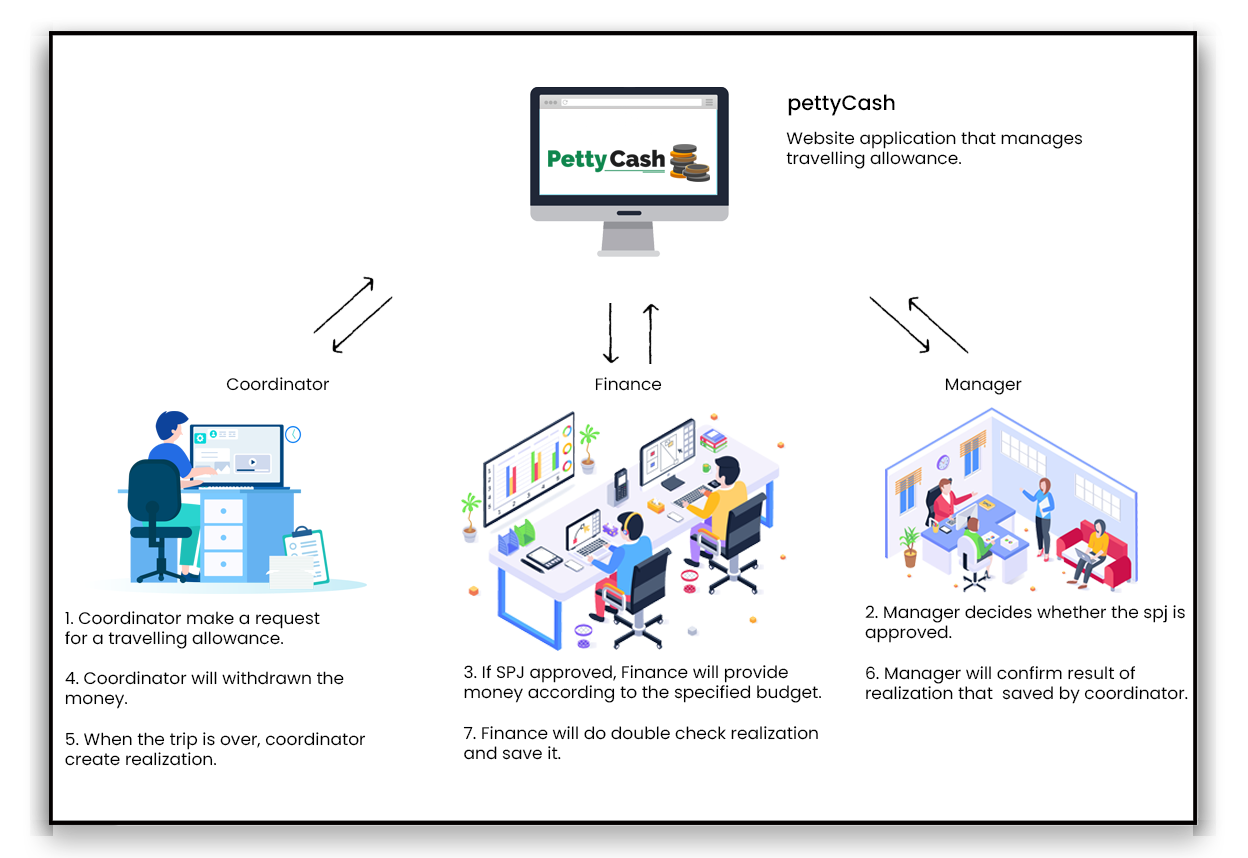
<style>
.page{position:relative;width:1248px;height:858px;background:#ffffff}
.page>*{position:absolute;margin:0}
.t1{font:20.8px "Poppins-Medium";color:#000000}
.t2{font:16.7px "Poppins-Regular";color:#000000}
.t3{font:16.8px "Poppins-Regular";color:#000000}
</style>
<div class="page">
<p class="t1" style="left:788px;top:94px;width:107px;height:22px">pettyCash</p>
<p class="t2" style="left:786px;top:131px;width:297px;height:38px">Website application that manages <br>travelling allowance.</p>
<p class="t2" style="left:226px;top:377px;width:104px;height:14px">Coordinator</p>
<p class="t2" style="left:595px;top:377px;width:67px;height:14px">Finance</p>
<p class="t2" style="left:945px;top:378px;width:77px;height:17px">Manager</p>
<p class="t3" style="left:865px;top:605px;width:323px;height:99px">2. Manager decides whether the spj is <br>approved.<br><br>6. Manager will confirm result of <br>realization that  saved by coordinator.</p>
<p class="t2" style="left:65px;top:611px;width:301px;height:155px">1. Coordinator make a request <br>for a travelling allowance.<br><br>4. Coordinator will withdrawn the <br>money.<br><br>5. When the trip is over, coordinator<br>create realization.</p>
<p class="t3" style="left:463px;top:665px;width:358px;height:95px">3. If SPJ approved, Finance will provide <br>money according to the specified budget.<br><br>7. Finance will do double check realization<br>and save it.</p>
</div>
